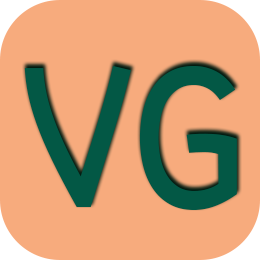
<style>
.page{position:relative;width:260px;height:260px;background:#f7ab7d}
.page>*{position:absolute;margin:0}
.t1{font:204.2px "MainlandPERSONAL-Medium";color:#035845}
</style>
<div class="page">
<p class="t1" style="left:24px;top:66px;width:213px;height:144px">VG</p>
</div>
